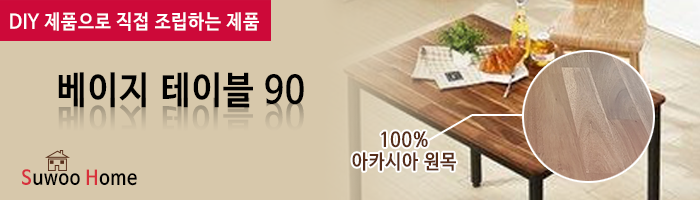
<style>
.page{position:relative;width:700px;height:200px;background:#d7c8ab}
.page>*{position:absolute;margin:0}
.t1{font:20px "NanumBarunGothicBold";letter-spacing:0.04em;color:#ffffff;scale:0.9 1}
.t2{font:37.7px "NanumBarunGothicBold";letter-spacing:0.04em;color:#000000;scale:0.9 1}
.t3{font:37.3px "NanumBarunGothicBold";letter-spacing:0.04em;scale:0.91 1}
.t4{font:20px/22px "NanumBarunGothicBold";letter-spacing:0.04em;color:#572e1a;scale:0.9 1}
.t5{font:20px "NanumBarunGothicBold";letter-spacing:0.04em;color:#000000;scale:0.9 1}
.t6{font:20px "NanumBarunGothicBold";letter-spacing:0.04em;color:#d7313d;scale:0.9 1}
.t7{font:20px "NanumBarunGothicBold";letter-spacing:0.04em;color:#d8313b;scale:0.9 1}
</style>
<div class="page">
<p class="t1" style="left:10px;top:12px;width:249px;height:19px">DIY 제품으로 직접 조립하는 제품</p>
<p class="t2" style="left:58px;top:72px;width:246px;height:36px">베이지 테이블 90</p>
<p class="t3" style="left:58px;top:97px;width:246px;height:36px">베이지 테이블 90</p>
<p class="t4" style="left:352px;top:131px;width:104px;height:40px;text-align:center">100%<br>아카시아 원목</p>
<p class="t5" style="left:22px;top:169px;width:115px;height:17px"><span class="t6">S</span>uwoo <span class="t7">H</span>ome</p>
</div>
